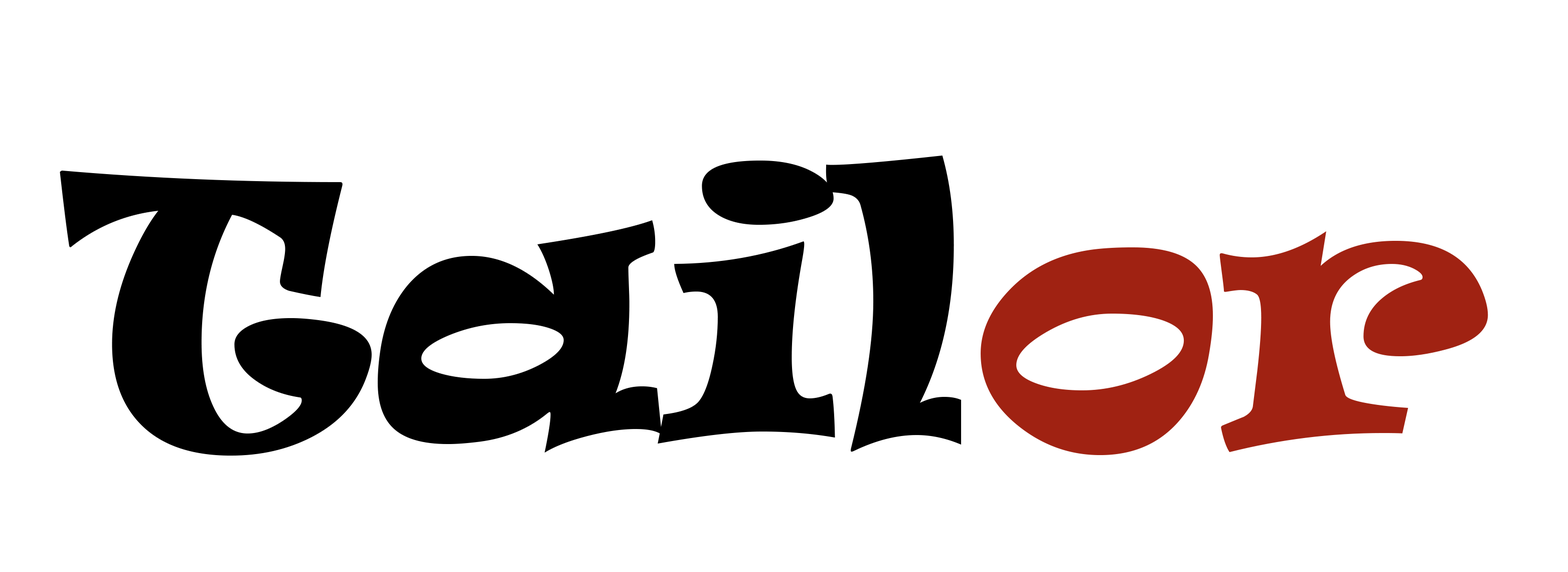
<style>
.page{position:relative;width:1568px;height:572px;background:#ffffff}
.page>*{position:absolute;margin:0}
.t1{font:345.6px "Ravie";color:#000000}
.t2{font:345.6px "Ravie";color:#a02212}
</style>
<div class="page">
<p class="t1" style="left:60px;top:155px;width:1428px;height:300px">Tail<span class="t2">or</span></p>
</div>
